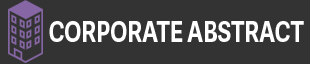
<style>
.page{position:relative;width:310px;height:64px;background:#333333}
.page>*{position:absolute;margin:0}
.t1{font:28px "AdelleSans-Bold";color:#ffffff;scale:0.81 1}
</style>
<div class="page">
<p class="t1" style="left:49px;top:21px;width:255px;height:21px">CORPORATE ABSTRACT</p>
</div>
